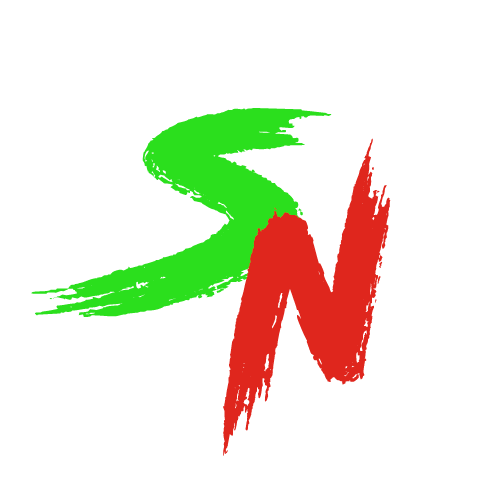
<style>
.page{position:relative;width:500px;height:500px;background:#ffffff}
.page>*{position:absolute;margin:0}
.t1{font:290.2px "RoadRage";letter-spacing:0.1em;color:#2bdf1d;scale:1.12 1}
.t2{font:263.7px "RoadRage";letter-spacing:0.1em;color:#df261d}
</style>
<div class="page">
<p class="t1" style="left:31px;top:108px;width:301px;height:209px">s</p>
<p class="t2" style="left:223px;top:138px;width:168px;height:318px;rotate:-17deg">n</p>
</div>
